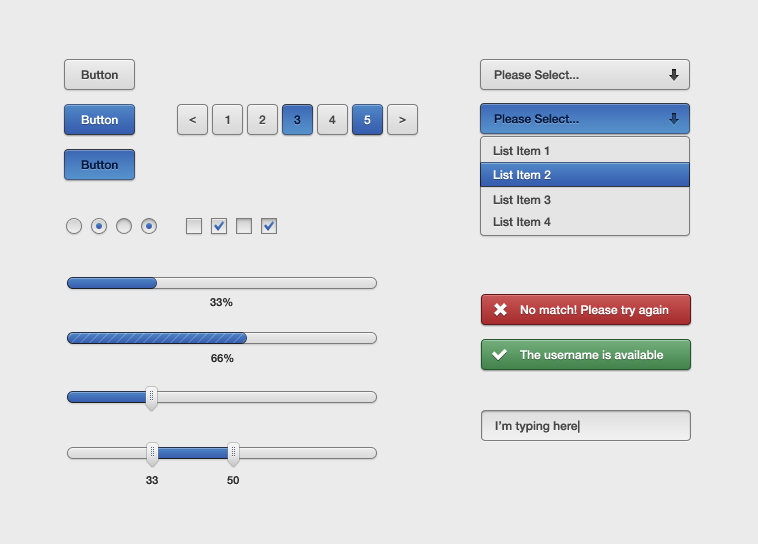
<style>
.page{position:relative;width:758px;height:544px;background:#ebebeb}
.page>*{position:absolute;margin:0}
.t1{font:12px "HelveticaNeueLTCom-Md";color:#464646}
.t2{font:12px "HelveticaNeueLTCom-Md";color:#ffffff}
.t3{font:12px "HelveticaNeueLTCom-Md";color:#041940}
.t4{font:11px "HelveticaNeueLTCom-Md";color:#2d2d2d}
</style>
<div class="page">
<p class="t1" style="left:81px;top:70px;width:37px;height:10px">Button</p>
<p class="t1" style="left:494px;top:70px;width:85px;height:10px">Please Select...</p>
<p class="t2" style="left:81px;top:115px;width:37px;height:10px">Button</p>
<p class="t1" style="left:189px;top:116px;width:7px;height:8px">&lt;</p>
<p class="t1" style="left:225px;top:115px;width:5px;height:9px">1</p>
<p class="t1" style="left:259px;top:115px;width:7px;height:9px">2</p>
<p class="t3" style="left:294px;top:115px;width:7px;height:10px">3</p>
<p class="t1" style="left:329px;top:115px;width:7px;height:9px">4</p>
<p class="t2" style="left:364px;top:115px;width:7px;height:10px">5</p>
<p class="t1" style="left:399px;top:116px;width:7px;height:8px">&gt;</p>
<p class="t3" style="left:494px;top:114px;width:85px;height:10px">Please Select...</p>
<p class="t1" style="left:493px;top:146px;width:56px;height:10px">List Item 1</p>
<p class="t3" style="left:81px;top:160px;width:37px;height:10px">Button</p>
<p class="t2" style="left:493px;top:170px;width:58px;height:10px">List Item 2</p>
<p class="t1" style="left:493px;top:195px;width:58px;height:10px">List Item 3</p>
<p class="t1" style="left:493px;top:217px;width:58px;height:10px">List Item 4</p>
<p class="t4" style="left:210px;top:298px;width:23px;height:9px">33%</p>
<p class="t2" style="left:520px;top:305px;width:149px;height:12px">No match! Please try again</p>
<p class="t2" style="left:520px;top:350px;width:144px;height:10px">The username is available</p>
<p class="t4" style="left:211px;top:354px;width:23px;height:9px">66%</p>
<p class="t1" style="left:495px;top:420px;width:85px;height:13px">I’m typing here|</p>
<p class="t4" style="left:146px;top:476px;width:12px;height:9px">33</p>
<p class="t4" style="left:227px;top:476px;width:12px;height:9px">50</p>
</div>
